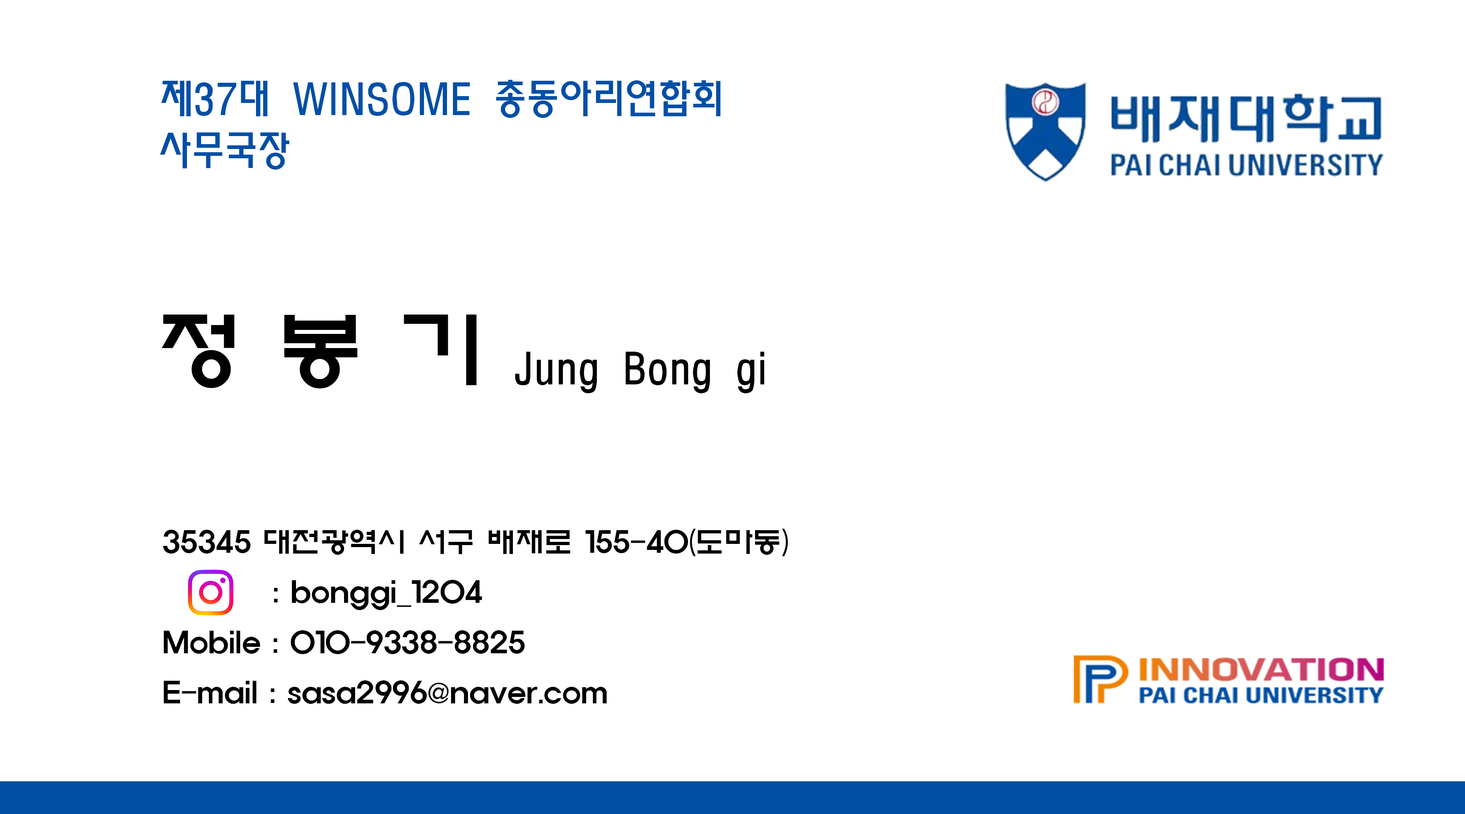
<style>
.page{position:relative;width:1465px;height:814px;background:#ffffff}
.page>*{position:absolute;margin:0}
.t1{font:40.2px "MoeumTR-HM";color:#004fa6}
.t2{font:40.2px "MoeumTR-HM";color:#000000}
.t3{font:86.1px "ExpoM-HM";color:#000000}
.t4{font:28.7px "ExpoM-HM";color:#000000}
</style>
<div class="page">
<p class="t1" style="left:161px;top:80px;width:560px;height:38px">제37대 WINSOME 총동아리연합회</p>
<p class="t1" style="left:160px;top:132px;width:130px;height:38px">사무국장</p>
<p class="t2" style="left:162px;top:315px;width:602px;height:78px"><span class="t3">정 봉 기 </span>Jung Bong gi</p>
<p class="t4" style="left:163px;top:529px;width:625px;height:175px">35345 대전광역시 서구 배재로 155-40(도마동)<br>        : bonggi_1204<br>Mobile : 010-9338-8825<br>E-mail : sasa2996@naver.com</p>
</div>
